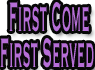
<style>
.page{position:relative;width:95px;height:70px;background:#070707}
.page>*{position:absolute;margin:0}
.t1{font:54.2px "Copperplate";color:#b66ed7;scale:0.27 1}
.t2{font:103px "CourierNewPS-BoldMT";color:#b66ed7;scale:0.27 1}
</style>
<div class="page">
<p class="t1" style="left:9px;top:1px;width:80px;height:31px"><span class="t2"> </span>First Come</p>
<p class="t1" style="left:0px;top:37px;width:94px;height:31px"><span class="t2"> </span>First Served</p>
</div>
